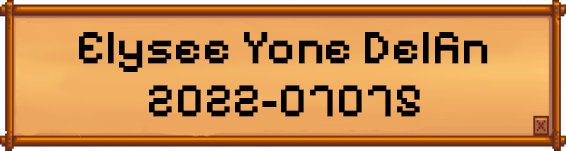
<style>
.page{position:relative;width:566px;height:151px}
.page>*{position:absolute;margin:0}
.t1{font:48.7px "PixelifySans-SemiBold";color:#000000}
.t2{font:48.3px "PixelifySans-SemiBold";color:#000000}
</style>
<div class="page">
<p class="t1" style="left:79px;top:32px;width:409px;height:40px">Elysee Yone Delfin</p>
<p class="t2" style="left:149px;top:85px;width:271px;height:32px">2022-07075</p>
</div>
